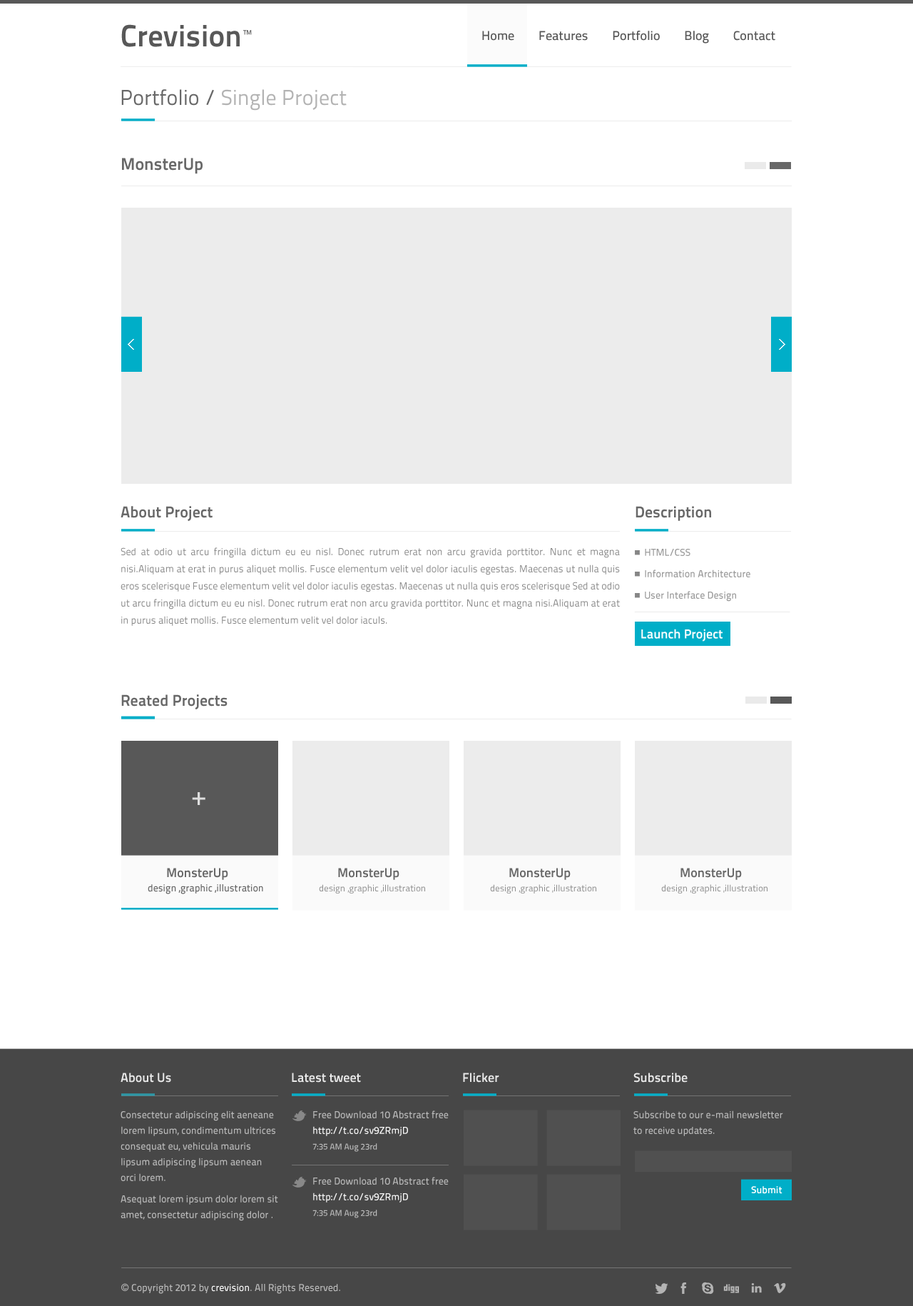
<style>
.page{position:relative;width:913px;height:1306px;background:#ffffff}
.page>*{position:absolute;margin:0}
.t1{font:12.8px "TitilliumText22L-Medium";color:#585858}
.t2{font:21.4px "TitilliumText22L-Regular";color:#b3b3b3}
.t3{font:21.4px "TitilliumText22L-Regular";color:#686868}
.t4{font:17.1px "TitilliumText22L-Bold";color:#686868}
.t5{font:15.7px "TitilliumText22L-Bold";color:#686868}
.t6{font:10px/17.1px "TitilliumText22L-Regular";color:#868686}
.t7{font:10px/21.4px "TitilliumText22L-Medium";color:#999999}
.t8{font:12.8px "TitilliumText22L-Bold";color:#ffffff}
.t9{font:25.7px "TitilliumText22L-Medium";color:#dedede}
.t10{font:12.8px "TitilliumText22L-Bold";color:#686868}
.t11{font:10px "TitilliumText22L-Medium";color:#686868}
.t12{font:9.3px "TitilliumText22L-Regular";color:#8c8c8c}
.t13{font:12.8px "TitilliumText22L-Bold";color:#e8e8e8}
.t14{font:10px/15.7px "TitilliumText22L-Medium";color:#b9b9b9}
.t15{font:10px/15.7px "TitilliumText22L-Medium";color:#fafafa}
.t16{font:8.6px/15.7px "TitilliumText22L-Medium";color:#b9b9b9}
.t17{font:10px "TitilliumText22L-Bold";color:#ffffff}
.t18{font:10px "TitilliumText22L-Medium";color:#b9b9b9}
.t19{font:10px "ArialMT";color:#b9b9b9}
.t20{font:10px "TitilliumText22L-Medium";color:#fafafa}
</style>
<div class="page">
<p class="t1" style="left:482px;top:31px;width:294px;height:13px">Home        Features        Portfolio        Blog        Contact</p>
<p class="t2" style="left:121px;top:89px;width:226px;height:22px"><span class="t3">Portfolio /</span> Single Project</p>
<p class="t4" style="left:122px;top:158px;width:81px;height:16px">MonsterUp</p>
<p class="t5" style="left:121px;top:506px;width:92px;height:16px">About Project</p>
<p class="t5" style="left:636px;top:506px;width:75px;height:15px">Description</p>
<p class="t6" style="left:121px;top:547px;width:499px;height:79px;text-align:justify">Sed at odio ut arcu fringilla dictum eu eu nisl. Donec rutrum erat non arcu gravida porttitor. Nunc et magna nisi.Aliquam at erat in purus aliquet mollis. Fusce elementum velit vel dolor iaculis egestas. Maecenas ut nulla quis eros scelerisque Fusce elementum velit vel dolor iaculis egestas. Maecenas ut nulla quis eros scelerisque Sed at odio ut arcu fringilla dictum eu eu nisl. Donec rutrum erat non arcu gravida porttitor. Nunc et magna nisi.Aliquam at erat in purus aliquet mollis. Fusce elementum velit vel dolor iaculs.</p>
<p class="t7" style="left:645px;top:548px;width:106px;height:53px;text-align:justify">HTML/CSS<br>    Information Architecture<br>    User Interface Design</p>
<p class="t8" style="left:641px;top:629px;width:82px;height:12px">Launch Project</p>
<p class="t5" style="left:121px;top:694px;width:107px;height:16px">Reated Projects</p>
<p class="t9" style="left:192px;top:792px;width:13px;height:13px">+</p>
<p class="t10" style="left:167px;top:868px;width:61px;height:12px">MonsterUp</p>
<p class="t10" style="left:338px;top:868px;width:62px;height:12px">MonsterUp</p>
<p class="t10" style="left:509px;top:868px;width:62px;height:12px">MonsterUp</p>
<p class="t10" style="left:681px;top:868px;width:61px;height:12px">MonsterUp</p>
<p class="t11" style="left:148px;top:884px;width:115px;height:10px">design ,graphic ,illustration</p>
<p class="t12" style="left:319px;top:884px;width:106px;height:9px">design ,graphic ,illustration</p>
<p class="t12" style="left:490px;top:884px;width:106px;height:9px">design ,graphic ,illustration</p>
<p class="t12" style="left:661px;top:884px;width:107px;height:9px">design ,graphic ,illustration</p>
<p class="t13" style="left:121px;top:1072px;width:50px;height:10px">About Us</p>
<p class="t13" style="left:292px;top:1072px;width:69px;height:10px">Latest tweet</p>
<p class="t13" style="left:463px;top:1072px;width:36px;height:10px">Flicker</p>
<p class="t13" style="left:634px;top:1072px;width:54px;height:10px">Subscribe</p>
<p class="t14" style="left:121px;top:1110px;width:157px;height:111px">Consectetur adipiscing elit aeneane lorem lipsum, condimentum ultrices consequat eu, vehicula mauris lipsum adipiscing lipsum aenean orci lorem.<br><br>Asequat lorem ipsum dolor lorem sit amet, consectetur adipiscing dolor .</p>
<p class="t14" style="left:313px;top:1110px;width:136px;height:42px">Free Download 10 Abstract free<br><span class="t15">http://t.co/sv9ZRmjD <br></span><span class="t16">7:35 AM Aug 23rd</span></p>
<p class="t14" style="left:634px;top:1110px;width:149px;height:26px">Subscribe to our e-mail newsletter to receive updates.</p>
<p class="t14" style="left:313px;top:1177px;width:136px;height:41px">Free Download 10 Abstract free<br><span class="t15">http://t.co/sv9ZRmjD <br></span><span class="t16">7:35 AM Aug 23rd</span></p>
<p class="t17" style="left:751px;top:1186px;width:32px;height:8px">Submit</p>
<p class="t18" style="left:121px;top:1283px;width:219px;height:11px"><span class="t19">© </span>Copyright 2012 by <span class="t20">crevision</span>. All Rights Reserved.</p>
</div>
